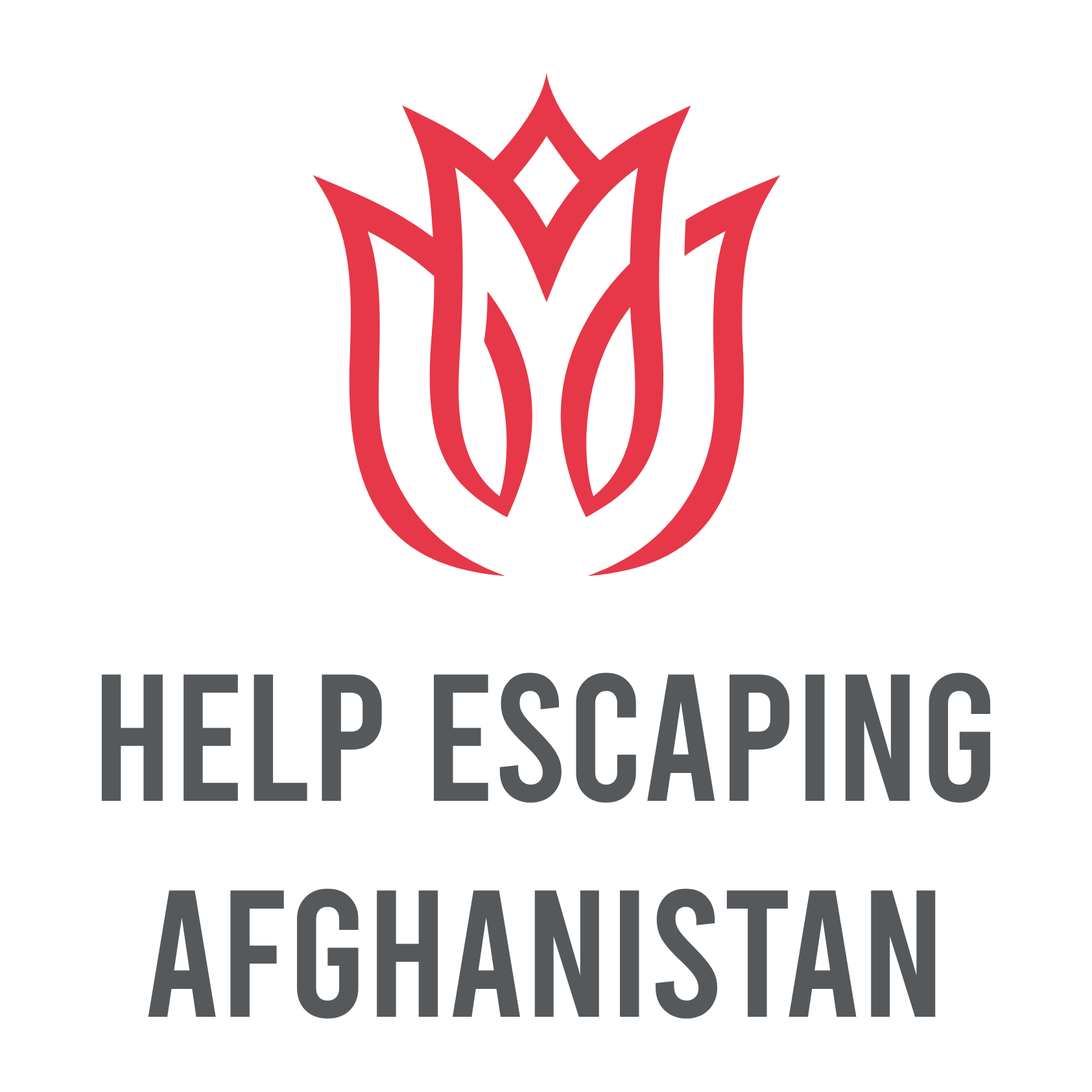
<style>
.page{position:relative;width:1092px;height:1092px;background:#ffffff}
.page>*{position:absolute;margin:0}
.t1{font:180.3px "Bebas-Regular";color:#56595b}
</style>
<div class="page">
<p class="t1" style="left:101px;top:672px;width:890px;height:347px;text-align:center">HELP escaping<br>afghanistan</p>
</div>
